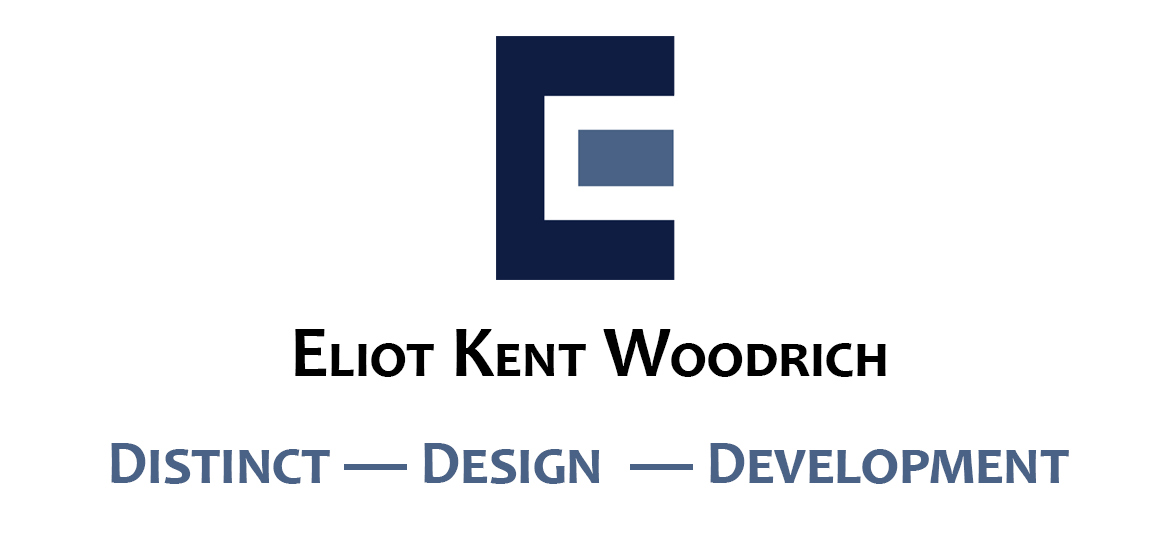
<style>
.page{position:relative;width:1168px;height:548px;background:#ffffff}
.page>*{position:absolute;margin:0}
.t1{font:61.3px "Candara-Bold";color:#000000;font-variant:small-caps}
.t2{font:73.6px "Candara-Bold";color:#000000;font-variant:small-caps}
.t3{font:62.5px "Candara-Bold";color:#496285;font-variant:small-caps}
</style>
<div class="page">
<p class="t1" style="left:295px;top:329px;width:591px;height:48px"><span class="t2">E</span>liot<span class="t2"> K</span>ent<span class="t2"> W</span>oodrich</p>
<p class="t3" style="left:111px;top:443px;width:958px;height:41px">Distinct — Design  — Development</p>
</div>
